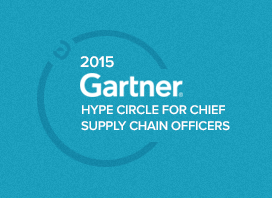
<style>
.page{position:relative;width:272px;height:198px}
.page>*{position:absolute;margin:0}
.t1{font:16px "ProximaNova-Semibold";letter-spacing:-0.015em;color:#ffffff}
.t2{font:13px/16px "ProximaNova-Semibold";letter-spacing:-0.015em;color:#ffffff}
</style>
<div class="page">
<p class="t1" style="left:80px;top:56px;width:34px;height:12px">2015</p>
<p class="t2" style="left:81px;top:105px;width:149px;height:26px">HYPE CIRCLE FOR CHIEF <br>SUPPLY CHAIN OFFICERS</p>
</div>
